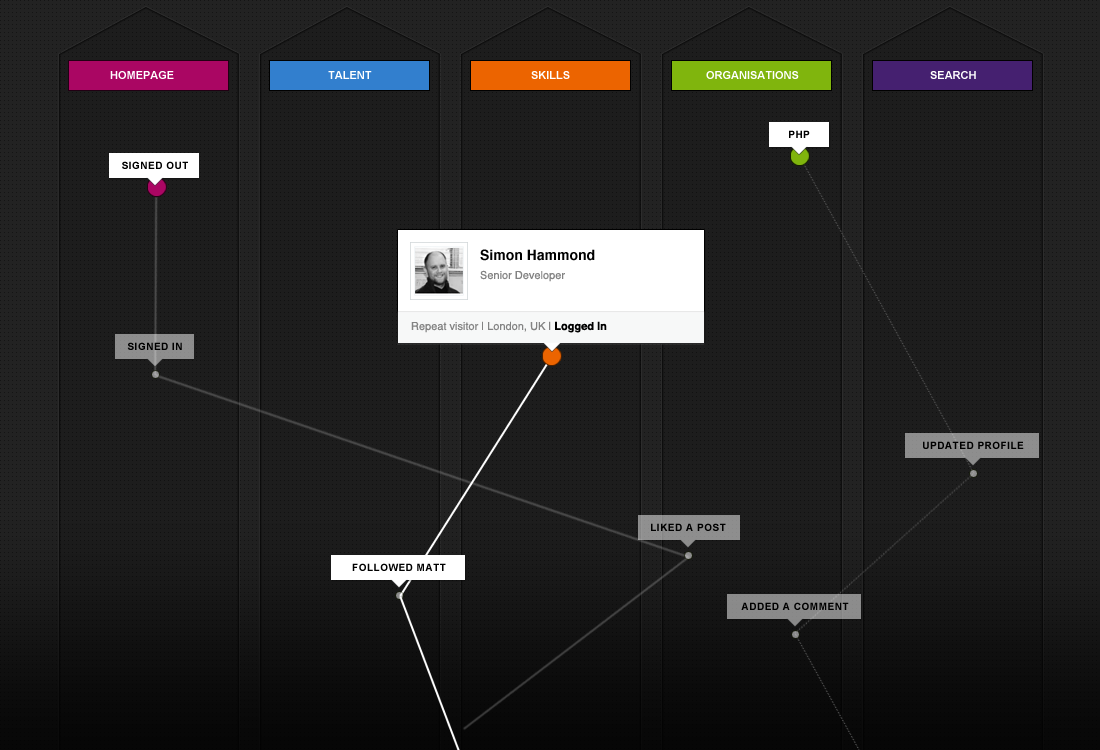
<style>
.page{position:relative;width:1100px;height:750px;background:#1d1d1d}
.page>*{position:absolute;margin:0}
.t1{font:11px "Arial-BoldMT";color:#ffffff;text-transform:uppercase}
.t2{font:10px "Arial-BoldMT";letter-spacing:0.05em;color:#000000;text-transform:uppercase}
.t3{font:14px "Helvetica-Bold";color:#010101}
.t4{font:11px "Helvetica";color:#838383}
.t5{font:11px "Helvetica-Bold";color:#000000}
</style>
<div class="page">
<p class="t1" style="left:110px;top:71px;width:64px;height:8px">homepage</p>
<p class="t1" style="left:328px;top:71px;width:44px;height:8px">TALENT</p>
<p class="t1" style="left:531px;top:71px;width:39px;height:8px">SKILLS</p>
<p class="t1" style="left:706px;top:71px;width:93px;height:8px">ORGANISATIONS</p>
<p class="t1" style="left:930px;top:71px;width:46px;height:8px">SEARCH</p>
<p class="t2" style="left:789px;top:130px;width:21px;height:8px">PHP</p>
<p class="t2" style="left:122px;top:161px;width:66px;height:8px">signed out</p>
<p class="t3" style="left:480px;top:249px;width:115px;height:12px">Simon Hammond</p>
<p class="t4" style="left:480px;top:270px;width:85px;height:12px">Senior Developer</p>
<p class="t4" style="left:411px;top:321px;width:196px;height:12px">Repeat visitor | London, UK | <span class="t5">Logged In</span></p>
<p class="t2" style="left:127px;top:342px;width:55px;height:8px">signed in</p>
<p class="t2" style="left:923px;top:441px;width:101px;height:8px">updated profile</p>
<p class="t2" style="left:651px;top:523px;width:75px;height:8px">liked a post</p>
<p class="t2" style="left:352px;top:563px;width:94px;height:8px">followed matt</p>
<p class="t2" style="left:741px;top:602px;width:108px;height:8px">added a comment</p>
</div>
